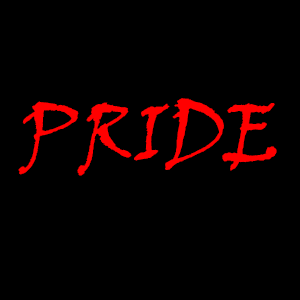
<style>
.page{position:relative;width:300px;height:300px;background:#000000}
.page>*{position:absolute;margin:0}
.t1{font:80px "VinerHandITC";color:#ff0000}
</style>
<div class="page">
<p class="t1" style="left:18px;top:98px;width:259px;height:78px">PRIDE</p>
</div>
